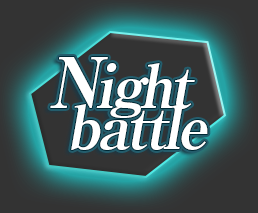
<style>
.page{position:relative;width:258px;height:213px;background:#333333}
.page>*{position:absolute;margin:0}
.t1{font:60px/50px "RyuminPro-ExBold";letter-spacing:-0.06em;color:#ffffff;font-style:italic}
.t2{font:70px/50px "RyuminPro-ExBold";letter-spacing:-0.06em;color:#ffffff;font-style:italic}
</style>
<div class="page">
<p class="t1" style="left:50px;top:57px;width:158px;height:93px;text-align:center"><span class="t2">N</span>ight<br>  battle</p>
</div>
